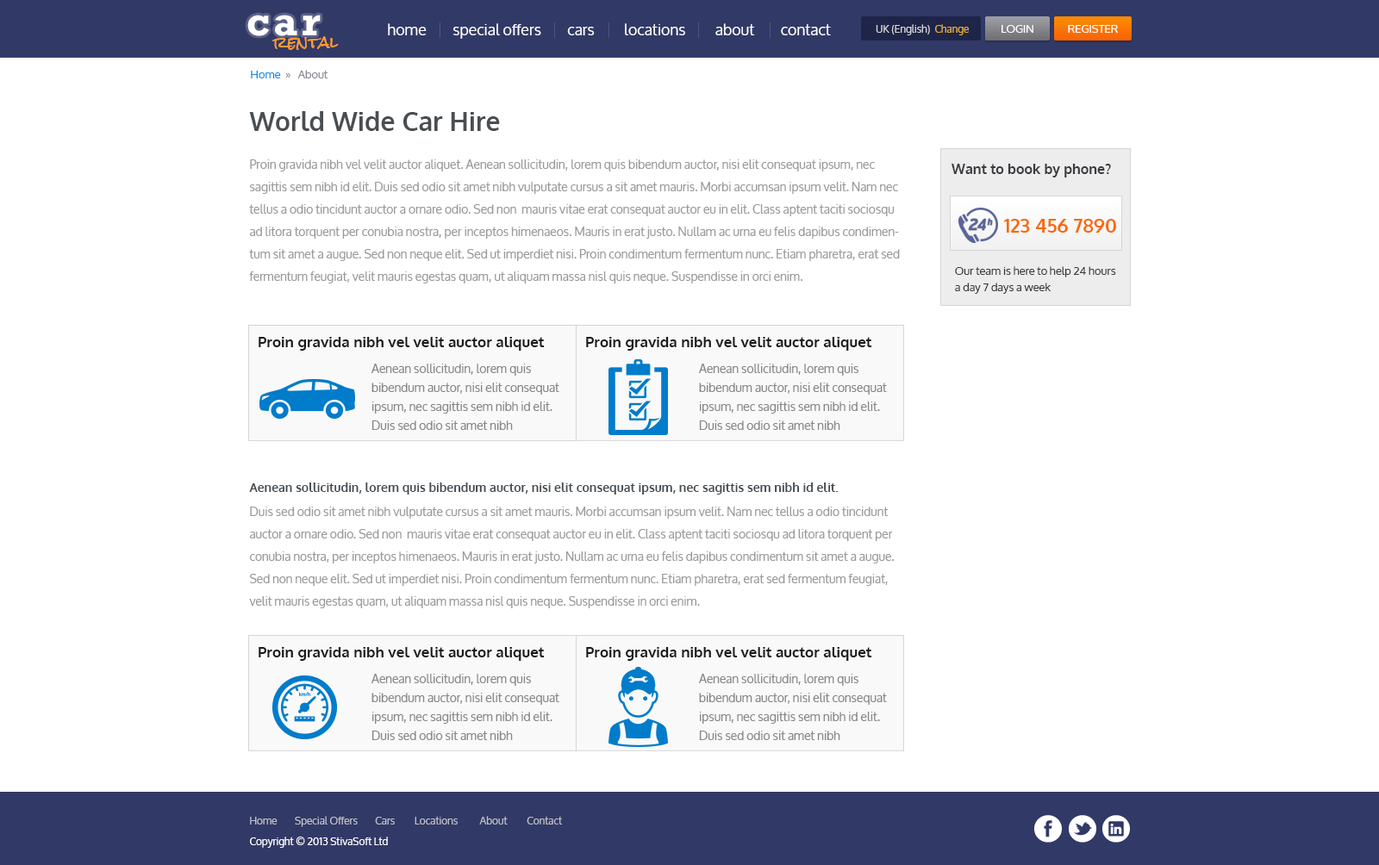
<style>
.page{position:relative;width:1379px;height:865px;background:#ffffff}
.page>*{position:absolute;margin:0}
.t1{font:41.4px "Rockwell-Bold";letter-spacing:0.1em;color:#ffffff}
.t2{font:15.5px "Oxygen";color:#ffffff}
.t3{font:10.3px "Oxygen";color:#d4d4d7}
.t4{font:10.3px "Oxygen";color:#e7ae40}
.t5{font:11.2px "Oxygen";color:#ffffff;text-transform:uppercase}
.t6{font:15.5px "RockSalt";color:#ff9b2f}
.t7{font:11.2px "Oxygen";color:#888b91}
.t8{font:11.2px "Oxygen";color:#0e8be5}
.t9{font:25.8px "Oxygen-Bold";color:#494e52}
.t10{font:12.1px/22.4px "Oxygen";color:#9a9a9b}
.t11{font:13.8px "Oxygen-Bold";color:#3a3c41}
.t12{font:19px "Oxygen-Bold";color:#fa6804}
.t13{font:11.2px/16.4px "Oxygen";color:#373a3f}
.t14{font:14.6px "Oxygen-Bold";color:#191a1b}
.t15{font:12.1px/19px "Oxygen";color:#858789}
.t16{font:12.1px/18.9px "Oxygen";color:#858789}
.t17{font:12.1px/22.4px "Oxygen-Bold";color:#454d53}
.t18{font:12.1px/12.1px "Oxygen";color:#9a9a9b}
.t19{font:12px/18.9px "Oxygen";color:#858789}
.t20{font:10.3px "Oxygen";color:#bfc0c6}
.t21{font:10.3px/20.7px "Oxygen";color:#ffffff}
</style>
<div class="page">
<p class="t1" style="left:247px;top:15px;width:74px;height:21px">car</p>
<p class="t2" style="left:388px;top:23px;width:443px;height:16px">home        special offers        cars         locations         about        contact</p>
<p class="t3" style="left:875px;top:24px;width:93px;height:11px">UK (English)  <span class="t4">Change</span></p>
<p class="t5" style="left:1001px;top:25px;width:32px;height:8px">Login</p>
<p class="t5" style="left:1067px;top:25px;width:50px;height:8px">Register</p>
<p class="t6" style="left:272px;top:36px;width:67px;height:14px">rental</p>
<p class="t7" style="left:251px;top:70px;width:77px;height:8px"><span class="t8"> Home</span>  »   About</p>
<p class="t9" style="left:249px;top:111px;width:251px;height:20px">World Wide Car Hire</p>
<p class="t10" style="left:249px;top:159px;width:650px;height:124px">Proin gravida nibh vel velit auctor aliquet. Aenean sollicitudin, lorem quis bibendum auctor, nisi elit consequat ipsum, nec sagittis sem nibh id elit. Duis sed odio sit amet nibh vulputate cursus a sit amet mauris. Morbi accumsan ipsum velit. Nam nec tellus a odio tincidunt auctor a ornare odio. Sed non  mauris vitae erat consequat auctor eu in elit. Class aptent taciti sociosqu ad litora torquent per conubia nostra, per inceptos himenaeos. Mauris in erat justo. Nullam ac urna eu felis dapibus condimentum sit amet a augue. Sed non neque elit. Sed ut imperdiet nisi. Proin condimentum fermentum nunc. Etiam pharetra, erat sed fermentum feugiat, velit mauris egestas quam, ut aliquam massa nisl quis neque. Suspendisse in orci enim.</p>
<p class="t11" style="left:951px;top:164px;width:160px;height:13px">Want to book by phone?</p>
<p class="t12" style="left:1004px;top:219px;width:112px;height:14px">123 456 7890</p>
<p class="t13" style="left:955px;top:266px;width:161px;height:28px">Our team is here to help 24 hours a day 7 days a week</p>
<p class="t14" style="left:258px;top:337px;width:287px;height:14px">Proin gravida nibh vel velit auctor aliquet</p>
<p class="t14" style="left:586px;top:337px;width:286px;height:14px">Proin gravida nibh vel velit auctor aliquet</p>
<p class="t15" style="left:370px;top:364px;width:189px;height:66px">Aenean sollicitudin, lorem quis bibendum auctor, nisi elit consequat ipsum, nec sagittis sem nibh id elit. Duis sed odio sit amet nibh</p>
<p class="t16" style="left:698px;top:364px;width:189px;height:66px">Aenean sollicitudin, lorem quis bibendum auctor, nisi elit consequat ipsum, nec sagittis sem nibh id elit. Duis sed odio sit amet nibh</p>
<p class="t10" style="left:249px;top:482px;width:645px;height:126px"><span class="t17">Aenean sollicitudin, lorem quis bibendum auctor, nisi elit consequat ipsum, nec sagittis sem nibh id elit. <br></span><span class="t18"><br>Duis sed odio sit amet nibh vulputate cursus a sit amet mauris. Morbi accumsan ipsum velit. Nam nec tellus a odio tincidunt </span>auctor a ornare odio. Sed non  mauris vitae erat consequat auctor eu in elit. Class aptent taciti sociosqu ad litora torquent per conubia nostra, per inceptos himenaeos. Mauris in erat justo. Nullam ac urna eu felis dapibus condimentum sit amet a augue. Sed non neque elit. Sed ut imperdiet nisi. Proin condimentum fermentum nunc. Etiam pharetra, erat sed fermentum feugiat, velit mauris egestas quam, ut aliquam massa nisl quis neque. Suspendisse in orci enim.</p>
<p class="t14" style="left:258px;top:647px;width:287px;height:14px">Proin gravida nibh vel velit auctor aliquet</p>
<p class="t14" style="left:586px;top:647px;width:286px;height:14px">Proin gravida nibh vel velit auctor aliquet</p>
<p class="t16" style="left:370px;top:674px;width:189px;height:66px">Aenean sollicitudin, lorem quis bibendum auctor, nisi elit consequat ipsum, nec sagittis sem nibh id elit. Duis sed odio sit amet nibh</p>
<p class="t19" style="left:698px;top:674px;width:189px;height:66px">Aenean sollicitudin, lorem quis bibendum auctor, nisi elit consequat ipsum, nec sagittis sem nibh id elit. Duis sed odio sit amet nibh</p>
<p class="t20" style="left:250px;top:816px;width:312px;height:32px">Home        Special Offers        Cars         Locations          About         Contact<br><span class="t21">Copyright © 2013 StivaSoft Ltd</span></p>
</div>
